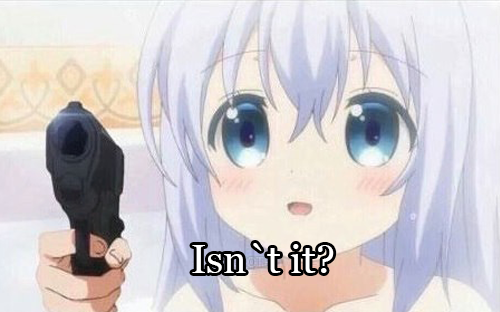
<style>
.page{position:relative;width:500px;height:312px}
.page>*{position:absolute;margin:0}
.t1{font:40px "Georgia";color:#ffffff}
</style>
<div class="page">
<p class="t1" style="left:192px;top:243px;width:142px;height:30px">Isn`t it?</p>
</div>
